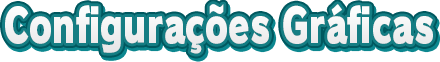
<style>
.page{position:relative;width:440px;height:62px;background:#ffffff}
.page>*{position:absolute;margin:0}
.t1{font:46.7px "RodinPro-UB";letter-spacing:0.003em;color:#f2f2f3;scale:0.73 1}
</style>
<div class="page">
<p class="t1" style="left:5px;top:4px;width:428px;height:50px">Configurações Gráficas</p>
</div>
